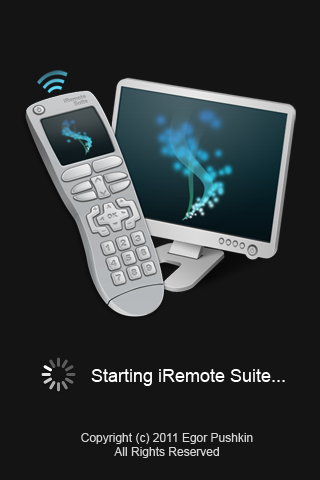
<style>
.page{position:relative;width:320px;height:480px;background:#141414}
.page>*{position:absolute;margin:0}
.t1{font:18px "ArialMT";color:#ffffff}
.t2{font:12px "ArialMT";color:#d4d4d4}
</style>
<div class="page">
<p class="t1" style="left:91px;top:369px;width:194px;height:17px">Starting iRemote Suite...</p>
<p class="t2" style="left:81px;top:433px;width:172px;height:25px;text-align:center">Copyright (c) 2011 Egor Pushkin<br>All Rights Reserved</p>
</div>
